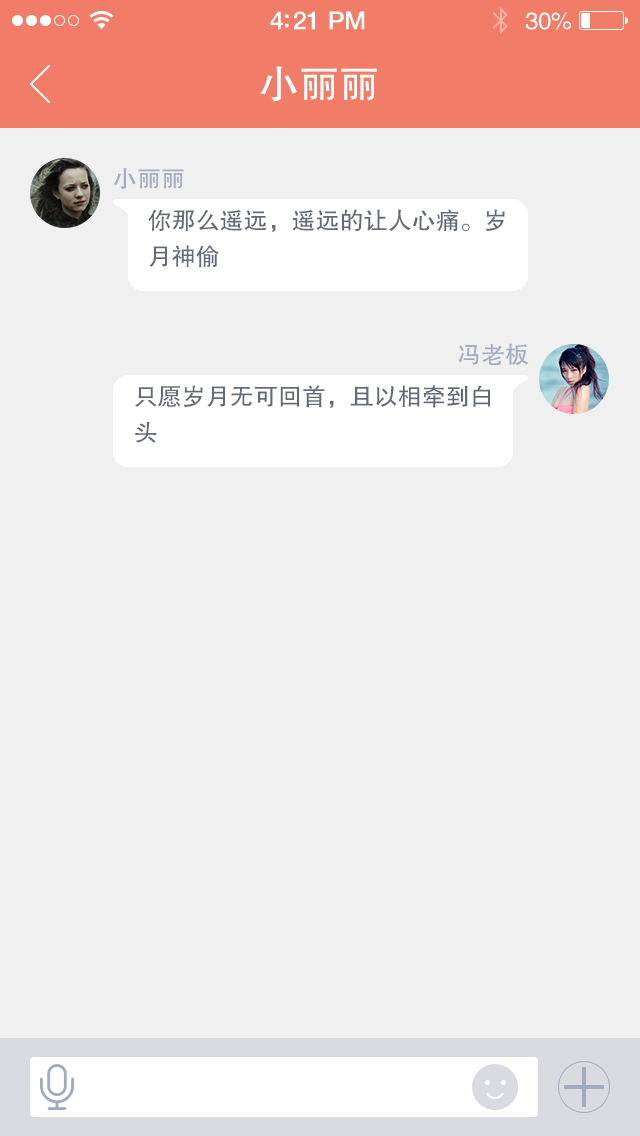
<style>
.page{position:relative;width:640px;height:1136px;background:#f0f0f0}
.page>*{position:absolute;margin:0}
.t1{font:25px "HelveticaNeue-Medium";letter-spacing:-0.02em;color:#ffffff}
.t2{font:24px "FZHTJW--GB1-0";letter-spacing:-0.02em;color:#ffffff}
.t3{font:40px "FZHTJW--GB1-0";color:#ffffff}
.t4{font:24px "FZHTJW--GB1-0";color:#a3abbe}
.t5{font:24px/36px "FZHTJW--GB1-0";color:#626a77}
</style>
<div class="page">
<p class="t1" style="left:270px;top:11px;width:95px;height:19px">4:21 PM</p>
<p class="t2" style="left:525px;top:12px;width:46px;height:18px">30%</p>
<p class="t3" style="left:260px;top:66px;width:117px;height:36px">小丽丽</p>
<p class="t4" style="left:113px;top:168px;width:71px;height:21px">小丽丽</p>
<p class="t5" style="left:148px;top:209px;width:357px;height:59px">你那么遥远，遥远的让人心痛。岁<br>月神偷</p>
<p class="t4" style="left:458px;top:343px;width:71px;height:23px">冯老板</p>
<p class="t5" style="left:135px;top:385px;width:356px;height:58px">只愿岁月无可回首，且以相牵到白<br>头</p>
</div>
